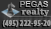
<style>
.page{position:relative;width:51px;height:29px}
.page>*{position:absolute;margin:0}
.t1{font:8px "ArialMT";font-weight:bold}
.t2{font:8px "DejaVuSerif-Bold";color:#9a9a9a;font-weight:bold;text-decoration:underline}
.t3{font:8px "MyriadPro-BlackCond";color:#9a9a9a;font-weight:bold}
</style>
<div class="page">
<p class="t1" style="left:20px;top:1px;width:28px;height:6px">PEGAS</p>
<p class="t2" style="left:9px;top:8px;width:42px;height:9px">realty</p>
<p class="t3" style="left:2px;top:20px;width:49px;height:7px">(495) 222-95-20</p>
</div>
